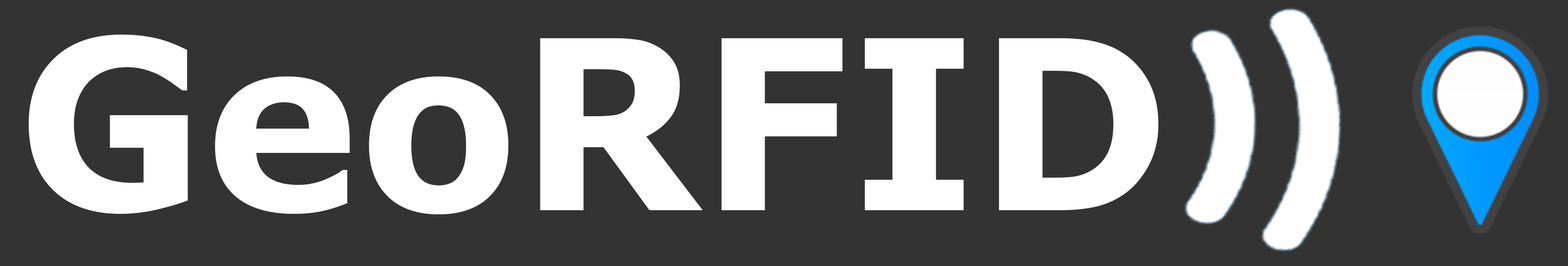
<style>
.page{position:relative;width:1568px;height:266px;background:#333333}
.page>*{position:absolute;margin:0}
.t1{font:236.5px "Verdana-Bold";color:#ffffff}
</style>
<div class="page">
<p class="t1" style="left:28px;top:35px;width:1131px;height:179px">GeoRFID</p>
</div>
